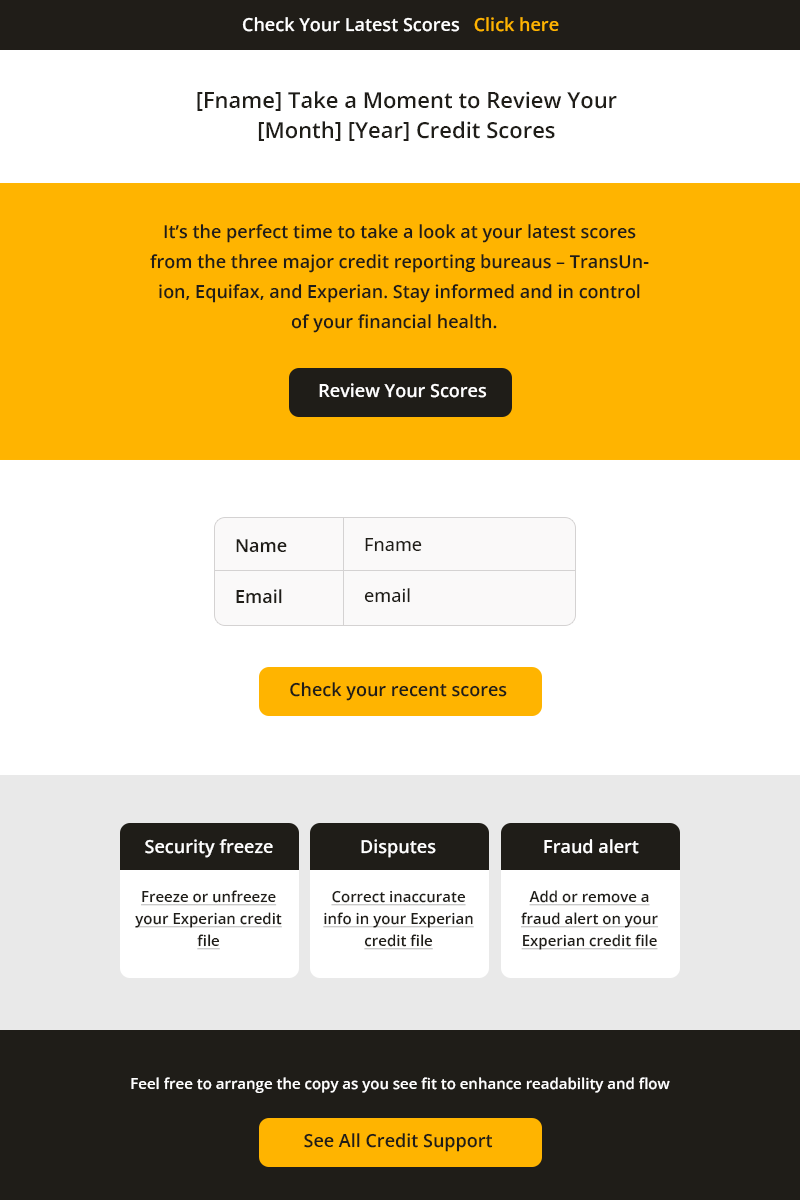
<style>
.page{position:relative;width:800px;height:1200px;background:#ffffff}
.page>*{position:absolute;margin:0}
.t1{font:18px "OpenSans-SemiBold";color:#ffffff}
.t2{font:18px "OpenSans-SemiBold";color:#ffb400}
.t3{font:22px/30px "OpenSans-SemiBold";color:#1f1d18}
.t4{font:22px/30px "OpenSans-SemiBold";color:#ffffff}
.t5{font:18px/30px "OpenSans-SemiBold";color:#1f1d18}
.t6{font:18px/30px "OpenSans-SemiBold";color:#ffb400}
.t7{font:18px "OpenSans-SemiBold";color:#1f1d18}
.t8{font:18px "OpenSans-Medium";color:#1f1d18}
.t9{font:15px/22px "OpenSans-SemiBold";color:#1f1d18;text-decoration:underline}
.t10{font:15px "OpenSans-SemiBold";color:#ffffff}
</style>
<div class="page">
<p class="t1" style="left:242px;top:17px;width:317px;height:15px">Check Your Latest Scores   <span class="t2">Click here</span></p>
<p class="t3" style="left:184px;top:91px;width:433px;height:50px;text-align:center"><span class="t4">a</span>[Fname] Take a Moment to Review Your <br><span class="t4">a</span>[Month] [Year] Credit Scores</p>
<p class="t5" style="left:150px;top:224px;width:499px;height:109px;text-align:center">It’s the perfect time to take a look at your latest scores from the three major credit reporting bureaus – TransUnion, Equifax, and Experian. Stay informed and in control of your financial health.<span class="t6">a</span></p>
<p class="t1" style="left:319px;top:383px;width:168px;height:15px">Review Your Scores</p>
<p class="t7" style="left:236px;top:539px;width:51px;height:14px">Name</p>
<p class="t8" style="left:365px;top:538px;width:57px;height:14px">Fname</p>
<p class="t7" style="left:236px;top:589px;width:46px;height:15px">Email</p>
<p class="t8" style="left:364px;top:588px;width:46px;height:15px">email</p>
<p class="t7" style="left:290px;top:682px;width:217px;height:19px">Check your recent scores</p>
<p class="t1" style="left:145px;top:839px;width:128px;height:19px">Security freeze</p>
<p class="t1" style="left:361px;top:839px;width:75px;height:19px">Disputes</p>
<p class="t1" style="left:544px;top:839px;width:95px;height:15px">Fraud alert</p>
<p class="t9" style="left:135px;top:890px;width:147px;height:60px;text-align:center">Freeze or unfreeze your Experian credit file</p>
<p class="t9" style="left:323px;top:890px;width:151px;height:60px;text-align:center">Correct inaccurate info in your Experian credit file</p>
<p class="t9" style="left:521px;top:890px;width:138px;height:60px;text-align:center">Add or remove a fraud alert on your Experian credit file</p>
<p class="t10" style="left:131px;top:1077px;width:539px;height:16px">Feel free to arrange the copy as you see fit to enhance readability and flow</p>
<p class="t7" style="left:304px;top:1133px;width:189px;height:19px">See All Credit Support</p>
</div>
